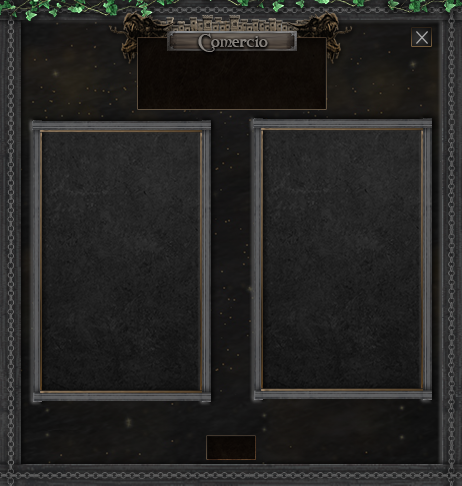
<style>
.page{position:relative;width:462px;height:486px}
.page>*{position:absolute;margin:0}
.t1{font:18.1px "Folkard";color:#88837e}
</style>
<div class="page">
<p class="t1" style="left:198px;top:33px;width:70px;height:19px">Comercio</p>
</div>
